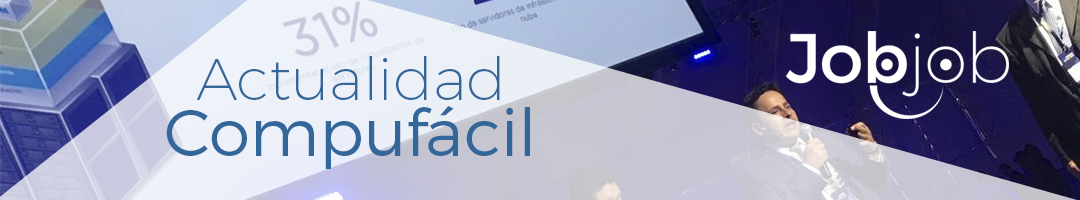
<style>
.page{position:relative;width:1080px;height:200px}
.page>*{position:absolute;margin:0}
.t1{font:59.2px "Montserrat-UltraLight";color:#336699}
.t2{font:66.1px "Montserrat-Light";color:#336699}
</style>
<div class="page">
<p class="t1" style="left:196px;top:56px;width:304px;height:44px">Actualidad</p>
<p class="t2" style="left:166px;top:106px;width:364px;height:63px">Compufácil</p>
</div>
